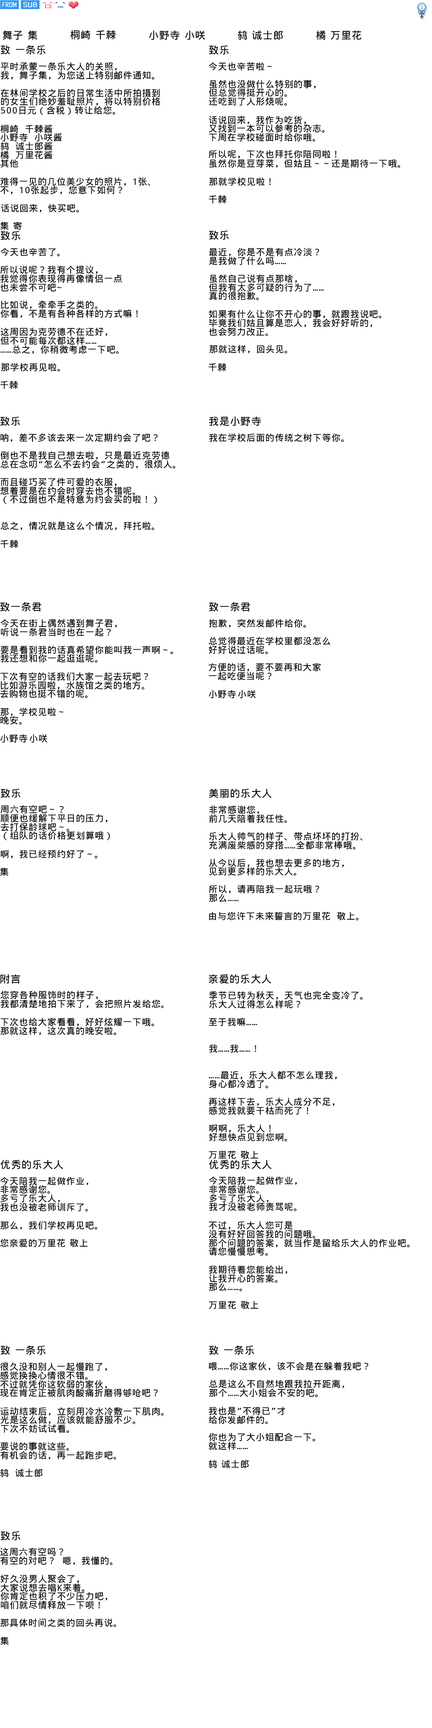
<style>
.page{position:relative;width:432px;height:1728px;background:#ffffff}
.page>*{position:absolute;margin:0}
.t1{font:10.1px "WenQuanYiMicroHeiMono";letter-spacing:0.05em;color:#000000}
.t2{font:9px/8.7px "WenQuanYiMicroHeiMono";letter-spacing:0.05em;color:#000000}
.t3{font:9px "WenQuanYiMicroHeiMono";letter-spacing:0.05em;color:#000000}
.t4{font:9px/9px "WenQuanYiMicroHeiMono";letter-spacing:0.05em;color:#000000}
</style>
<div class="page">
<p class="t1" style="left:70px;top:30px;width:46px;height:10px">桐崎 千棘</p>
<p class="t1" style="left:3px;top:30px;width:35px;height:10px">舞子 集</p>
<p class="t1" style="left:149px;top:30px;width:56px;height:10px">小野寺 小咲</p>
<p class="t1" style="left:238px;top:30px;width:45px;height:10px">鸫 诚士郎</p>
<p class="t1" style="left:316px;top:30px;width:46px;height:10px">橘 万里花</p>
<p class="t1" style="left:0px;top:45px;width:46px;height:9px">致 一条乐</p>
<p class="t1" style="left:209px;top:45px;width:20px;height:10px">致乐</p>
<p class="t2" style="left:0px;top:62px;width:154px;height:18px">平时承蒙一条乐大人的关照，  <br>我，舞子集，为您送上特别邮件通知。</p>
<p class="t3" style="left:208px;top:62px;width:64px;height:9px">今天也辛苦啦～</p>
<p class="t2" style="left:0px;top:89px;width:160px;height:26px">在林间学校之后的日常生活中所拍摄到<br>的女生们绝妙羞耻照片，将以特别价格<br>500日元（含税）转让给您。</p>
<p class="t2" style="left:209px;top:80px;width:107px;height:26px">虽然也没做什么特别的事，<br>但总觉得挺开心的。<br>还吃到了人形烧呢。</p>
<p class="t2" style="left:0px;top:124px;width:62px;height:44px">桐崎 千棘酱  <br>小野寺 小咲酱  <br>鸫 诚士郎酱  <br>橘 万里花酱  <br>其他</p>
<p class="t2" style="left:208px;top:116px;width:117px;height:26px">话说回来，我作为吃货，<br>又找到一本可以参考的杂志。<br>下周在学校碰面时给你哦。</p>
<p class="t4" style="left:209px;top:150px;width:191px;height:18px">所以呢，下次也拜托你陪同啦！<br>虽然你是豆芽菜，但姑且～～还是期待一下哦。</p>
<p class="t2" style="left:0px;top:177px;width:150px;height:17px">难得一见的几位美少女的照片，1张、<br>不，10张起步，您意下如何？</p>
<p class="t3" style="left:209px;top:177px;width:62px;height:9px">那就学校见啦！</p>
<p class="t3" style="left:209px;top:195px;width:18px;height:9px">千棘</p>
<p class="t3" style="left:1px;top:204px;width:78px;height:9px">话说回来，快买吧。</p>
<p class="t3" style="left:0px;top:221px;width:22px;height:9px">集 寄</p>
<p class="t1" style="left:0px;top:231px;width:21px;height:9px">致乐</p>
<p class="t1" style="left:209px;top:230px;width:20px;height:10px">致乐</p>
<p class="t3" style="left:0px;top:248px;width:60px;height:9px">今天也辛苦了。</p>
<p class="t2" style="left:209px;top:248px;width:110px;height:17px">最近，你是不是有点冷淡？<br>是我做了什么吗……</p>
<p class="t2" style="left:0px;top:265px;width:122px;height:27px">所以说呢？我有个提议，  <br>我觉得你表现得再像情侣一点<br>也未尝不可吧~</p>
<p class="t2" style="left:209px;top:274px;width:115px;height:26px">虽然自己说有点那啥，<br>但我有太多可疑的行为了……<br>真的很抱歉。</p>
<p class="t2" style="left:0px;top:300px;width:138px;height:18px">比如说，牵牵手之类的。  <br>你看，不是有各种各样的方式嘛！</p>
<p class="t2" style="left:209px;top:310px;width:172px;height:26px">如果有什么让你不开心的事，就跟我说吧。<br>毕竟我们姑且算是恋人，我会好好听的，<br>也会努力改正。</p>
<p class="t2" style="left:0px;top:327px;width:119px;height:27px">这周因为克劳德不在还好，  <br>但不可能每次都这样……  <br>……总之，你稍微考虑一下吧。</p>
<p class="t3" style="left:209px;top:345px;width:78px;height:9px">那就这样，回头见。</p>
<p class="t3" style="left:1px;top:363px;width:59px;height:9px">那学校再见啦。</p>
<p class="t3" style="left:208px;top:363px;width:18px;height:9px">千棘</p>
<p class="t3" style="left:0px;top:381px;width:18px;height:8px">千棘</p>
<p class="t1" style="left:0px;top:416px;width:20px;height:10px">致乐</p>
<p class="t1" style="left:209px;top:416px;width:52px;height:10px">我是小野寺</p>
<p class="t3" style="left:0px;top:433px;width:158px;height:9px">呐，差不多该去来一次定期约会了吧？</p>
<p class="t3" style="left:209px;top:433px;width:135px;height:9px">我在学校后面的传统之树下等你。</p>
<p class="t2" style="left:0px;top:451px;width:176px;height:18px">倒也不是我自己想去啦，只是最近克劳德<br>总在念叨“怎么不去约会”之类的，很烦人。</p>
<p class="t2" style="left:0px;top:478px;width:157px;height:26px">而且碰巧买了件可爱的衣服，  <br>想着要是在约会时穿去也不错呢。<br>（不过倒也不是特意为约会买的啦！）</p>
<p class="t3" style="left:0px;top:521px;width:154px;height:9px">总之，情况就是这么个情况，拜托啦。</p>
<p class="t3" style="left:0px;top:540px;width:18px;height:8px">千棘</p>
<p class="t1" style="left:0px;top:602px;width:42px;height:10px">致一条君</p>
<p class="t1" style="left:209px;top:602px;width:42px;height:10px">致一条君</p>
<p class="t2" style="left:0px;top:619px;width:117px;height:18px">今天在街上偶然遇到舞子君，  <br>听说一条君当时也在一起？</p>
<p class="t3" style="left:209px;top:619px;width:97px;height:9px">抱歉，突然发邮件给你。</p>
<p class="t2" style="left:208px;top:637px;width:122px;height:17px">总觉得最近在学校里都没怎么<br>好好说过话呢。</p>
<p class="t2" style="left:0px;top:645px;width:173px;height:18px">要是看到我的话真希望你能叫我一声啊～。<br>我还想和你一起逛逛呢。</p>
<p class="t2" style="left:208px;top:663px;width:113px;height:17px">方便的话，要不要再和大家<br>一起吃便当呢？</p>
<p class="t2" style="left:0px;top:672px;width:148px;height:26px">下次有空的话我们大家一起去玩吧？  <br>比如游乐园啦，水族馆之类的地方。  <br>去购物也挺不错的呢。</p>
<p class="t3" style="left:209px;top:690px;width:47px;height:9px">小野寺 小咲</p>
<p class="t2" style="left:0px;top:707px;width:63px;height:18px">那，学校见啦～<br>晚安。</p>
<p class="t3" style="left:0px;top:734px;width:47px;height:9px">小野寺 小咲</p>
<p class="t1" style="left:0px;top:788px;width:21px;height:10px">致乐</p>
<p class="t1" style="left:209px;top:788px;width:63px;height:10px">美丽的乐大人</p>
<p class="t2" style="left:0px;top:805px;width:110px;height:35px">周六有空吧～？<br>顺便也缓解下平日的压力，<br>去打保龄球吧～。<br>（组队的话价格更划算哦）</p>
<p class="t2" style="left:209px;top:805px;width:78px;height:18px">非常感谢您，<br>前几天陪着我任性。</p>
<p class="t2" style="left:209px;top:832px;width:153px;height:18px">乐大人帅气的样子、带点坏坏的打扮、<br>充满废柴感的穿搭……全都非常棒哦。</p>
<p class="t3" style="left:0px;top:850px;width:97px;height:9px">啊，我已经预约好了～。</p>
<p class="t3" style="left:0px;top:867px;width:8px;height:9px">集</p>
<p class="t2" style="left:209px;top:859px;width:135px;height:17px">从今以后，我也想去更多的地方，<br>见到更多样的乐大人。</p>
<p class="t2" style="left:209px;top:885px;width:110px;height:17px">所以，请再陪我一起玩哦？<br>那么……</p>
<p class="t3" style="left:209px;top:912px;width:150px;height:9px">由与您许下未来誓言的万里花 敬上。</p>
<p class="t1" style="left:0px;top:974px;width:21px;height:10px">附言</p>
<p class="t1" style="left:209px;top:974px;width:62px;height:10px">亲爱的乐大人</p>
<p class="t2" style="left:0px;top:991px;width:164px;height:17px">您穿各种服饰时的样子，<br>我都清楚地拍下来了，会把照片发给您。</p>
<p class="t2" style="left:209px;top:991px;width:154px;height:18px">季节已转为秋天，天气也完全变冷了。<br>乐大人过得怎么样呢？</p>
<p class="t2" style="left:0px;top:1018px;width:154px;height:17px">下次也给大家看看，好好炫耀一下哦。<br>那就这样，这次真的晚安啦。</p>
<p class="t3" style="left:209px;top:1018px;width:48px;height:8px">至于我嘛……</p>
<p class="t3" style="left:209px;top:1044px;width:47px;height:9px">我……我……！</p>
<p class="t2" style="left:209px;top:1071px;width:128px;height:17px">……最近，乐大人都不怎么理我，<br>身心都冷透了。</p>
<p class="t2" style="left:209px;top:1097px;width:126px;height:18px">再这样下去，乐大人成分不足，<br>感觉我就要干枯而死了！</p>
<p class="t2" style="left:209px;top:1124px;width:78px;height:18px">啊啊，乐大人！<br>好想快点见到您啊。</p>
<p class="t3" style="left:209px;top:1150px;width:50px;height:9px">万里花 敬上</p>
<p class="t1" style="left:0px;top:1160px;width:63px;height:9px">优秀的乐大人</p>
<p class="t1" style="left:209px;top:1160px;width:63px;height:9px">优秀的乐大人</p>
<p class="t2" style="left:0px;top:1177px;width:88px;height:35px">今天陪我一起做作业，<br>非常感谢您。<br>多亏了乐大人，<br>我也没被老师训斥了。</p>
<p class="t2" style="left:209px;top:1176px;width:88px;height:35px">今天陪我一起做作业，<br>非常感谢您。<br>多亏了乐大人，<br>我才没被老师责骂呢。</p>
<p class="t3" style="left:0px;top:1221px;width:97px;height:9px">那么，我们学校再见吧。</p>
<p class="t2" style="left:208px;top:1221px;width:202px;height:35px">不过，乐大人您可是<br>没有好好回答我的问题哦。<br>那个问题的答案，就当作是留给乐大人的作业吧。<br>请您慢慢思考。</p>
<p class="t3" style="left:0px;top:1239px;width:88px;height:8px">您亲爱的万里花 敬上</p>
<p class="t2" style="left:209px;top:1265px;width:78px;height:26px">我期待着您能给出，<br>让我开心的答案。<br>那么……。</p>
<p class="t3" style="left:209px;top:1301px;width:50px;height:9px">万里花 敬上</p>
<p class="t1" style="left:0px;top:1345px;width:46px;height:10px">致 一条乐</p>
<p class="t1" style="left:209px;top:1345px;width:45px;height:10px">致 一条乐</p>
<p class="t3" style="left:209px;top:1362px;width:159px;height:9px">喂……你这家伙，该不会是在躲着我吧？</p>
<p class="t2" style="left:0px;top:1362px;width:158px;height:35px">很久没和别人一起慢跑了，<br>感觉换换心情很不错。<br>不过就凭你这软弱的家伙，<br>现在肯定正被肌肉酸痛折磨得够呛吧？</p>
<p class="t2" style="left:209px;top:1380px;width:135px;height:17px">总是这么不自然地跟我拉开距离，<br>那个……大小姐会不安的吧。</p>
<p class="t2" style="left:0px;top:1407px;width:164px;height:26px">运动结束后，立刻用冷水冷敷一下肌肉。<br>光是这么做，应该就能舒服不少。<br>下次不妨试试看。</p>
<p class="t2" style="left:208px;top:1407px;width:77px;height:17px">我也是“不得已”才<br>给你发邮件的。</p>
<p class="t2" style="left:209px;top:1433px;width:106px;height:17px">你也为了大小姐配合一下。<br>就这样……</p>
<p class="t2" style="left:0px;top:1442px;width:116px;height:18px">要说的事就这些。<br>有机会的话，再一起跑步吧。</p>
<p class="t3" style="left:0px;top:1469px;width:43px;height:8px">鸫 诚士郎</p>
<p class="t3" style="left:209px;top:1460px;width:40px;height:9px">鸫 诚士郎</p>
<p class="t1" style="left:0px;top:1531px;width:21px;height:10px">致乐</p>
<p class="t2" style="left:0px;top:1547px;width:113px;height:18px">这周六有空吗？<br>有空的对吧？ 嗯，我懂的。</p>
<p class="t2" style="left:0px;top:1574px;width:108px;height:35px">好久没男人聚会了，<br>大家说想去唱K来着。<br>你肯定也积了不少压力吧，<br>咱们就尽情释放一下呗！</p>
<p class="t3" style="left:0px;top:1618px;width:116px;height:9px">那具体时间之类的回头再说。</p>
<p class="t3" style="left:0px;top:1636px;width:9px;height:9px">集</p>
</div>
